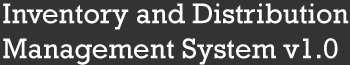
<style>
.page{position:relative;width:350px;height:65px;background:#333333}
.page>*{position:absolute;margin:0}
.t1{font:29.1px "Rockwell";color:#ffffff}
</style>
<div class="page">
<p class="t1" style="left:3px;top:3px;width:346px;height:62px">Inventory and Distribution<br>Management System v1.0</p>
</div>
